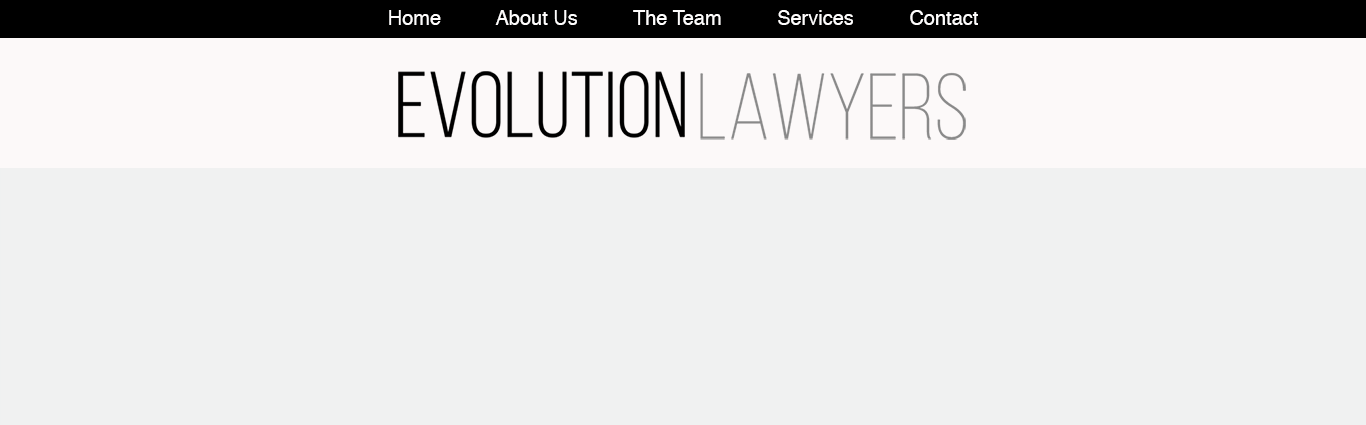
<style>
.page{position:relative;width:1366px;height:425px;background:#f0f1f1}
.page>*{position:absolute;margin:0}
.t1{font:20px "Helvetica";color:#fefdfd}
</style>
<div class="page">
<p class="t1" style="left:389px;top:10px;width:589px;height:15px">Home          About Us          The Team          Services          Contact</p>
</div>
